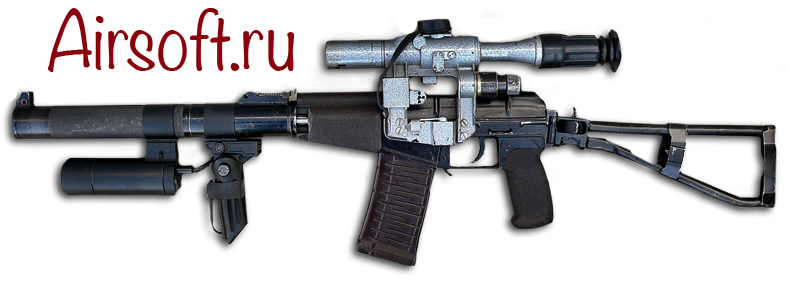
<style>
.page{position:relative;width:800px;height:286px;background:#ffffff}
.page>*{position:absolute;margin:0}
.t1{font:72px "Noteworthy-Light";color:#8a020b}
</style>
<div class="page">
<p class="t1" style="left:47px;top:8px;width:247px;height:64px">Airsoft.ru</p>
</div>
